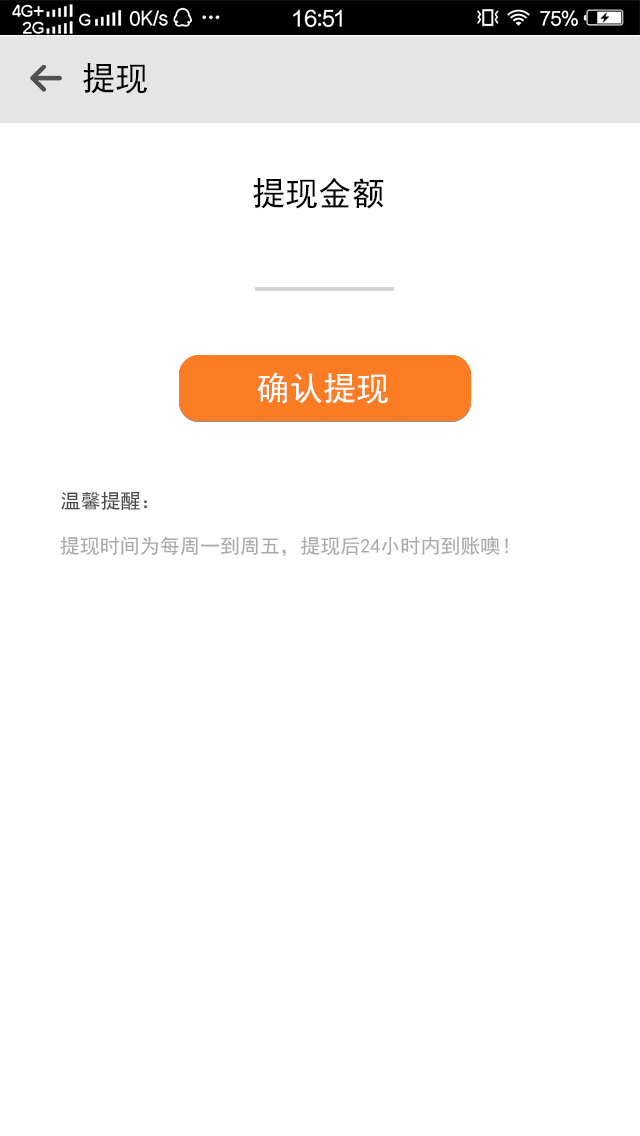
<style>
.page{position:relative;width:640px;height:1136px;background:#ffffff}
.page>*{position:absolute;margin:0}
.t1{font:33.3px "SimHei";letter-spacing:0.002em;color:#000000}
.t2{font:33.3px "SimHei";letter-spacing:0.002em;color:#010101}
.t3{font:33.3px "SimHei";letter-spacing:0.002em;color:#ebebeb}
.t4{font:33.3px "SimHei";letter-spacing:0.002em;color:#ffffff}
.t5{font:20px "SimHei";letter-spacing:0.002em;color:#4b4b4b}
.t6{font:12px "SimHei";letter-spacing:0.002em;color:#a9a9a9}
</style>
<div class="page">
<p class="t1" style="left:83px;top:63px;width:64px;height:31px">提现</p>
<p class="t2" style="left:253px;top:177px;width:131px;height:32px">提现金额</p>
<p class="t3" style="left:257px;top:373px;width:131px;height:32px">确认提现</p>
<p class="t4" style="left:257px;top:372px;width:131px;height:32px">确认提现</p>
<p class="t5" style="left:61px;top:491px;width:86px;height:20px">温馨提醒：</p>
<p class="t6" style="left:60px;top:536px;width:448px;height:20px">提现时间为每周一到周五，提现后24小时内到账噢！</p>
</div>
